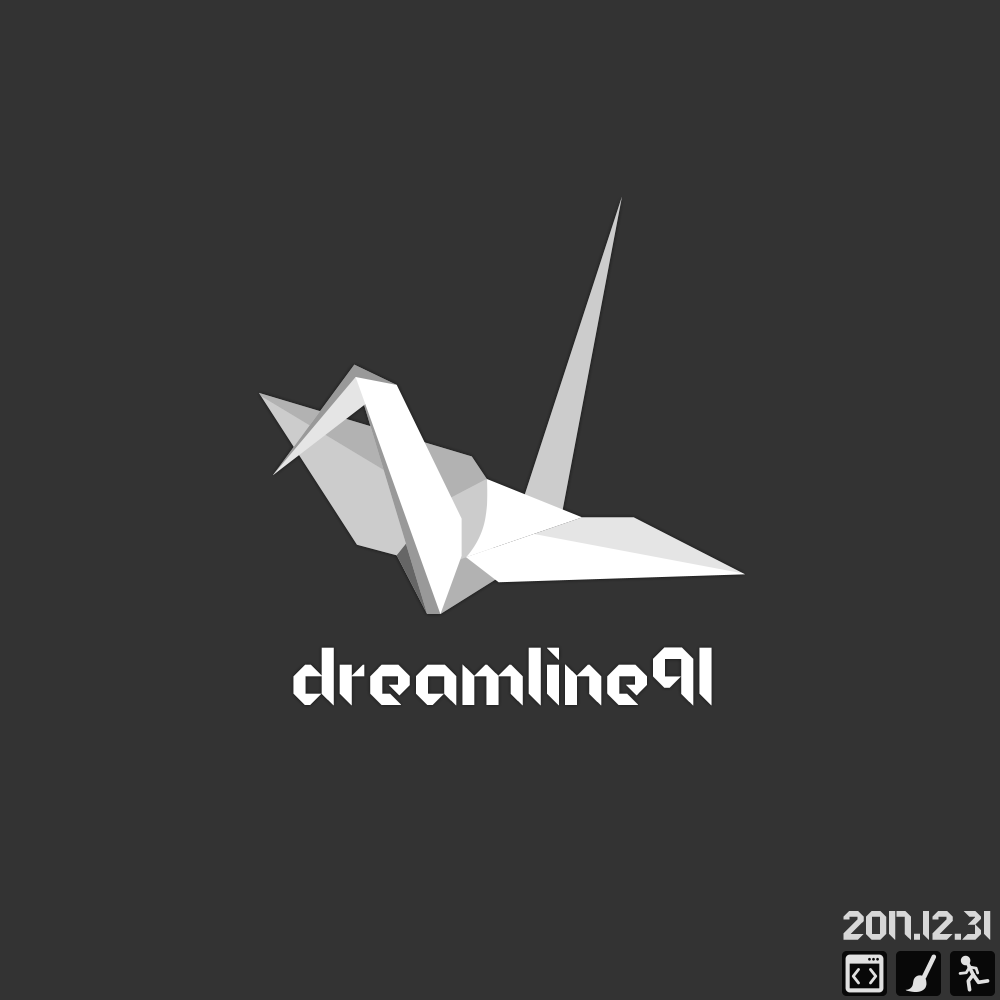
<style>
.page{position:relative;width:1000px;height:1000px;background:#333333}
.page>*{position:absolute;margin:0}
.t1{font:80px "Origram";color:#ffffff}
.t2{font:40px "Origram";color:#d7d7d7}
</style>
<div class="page">
<p class="t1" style="left:293px;top:647px;width:419px;height:59px">Dreamline91</p>
<p class="t2" style="left:843px;top:911px;width:148px;height:29px">2017.12.31</p>
</div>
